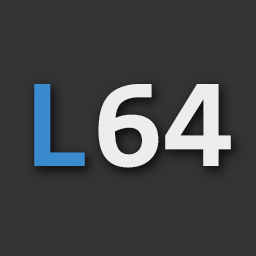
<style>
.page{position:relative;width:256px;height:256px;background:#333333}
.page>*{position:absolute;margin:0}
.t1{font:128px "Consolas-Bold";color:#ededed}
.t2{font:128px "Consolas-Bold";color:#3a8ace}
</style>
<div class="page">
<p class="t1" style="left:34px;top:84px;width:197px;height:84px"><span class="t2">L</span>64</p>
</div>
